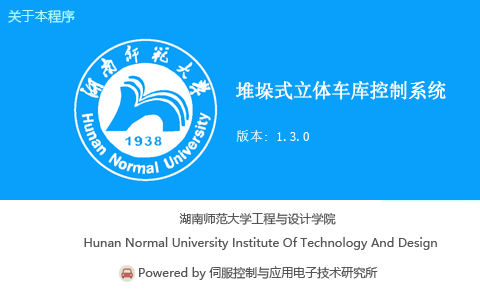
<style>
.page{position:relative;width:480px;height:300px;background:#09a0fb}
.page>*{position:absolute;margin:0}
.t1{font:13.3px "MicrosoftYaHei";color:#b6ffff}
.t2{font:18.7px "SimSun";color:#ffffff;font-weight:bold}
.t3{font:13.3px "SimSun";color:#ffffff}
.t4{font:12px "MicrosoftYaHei";color:#555555}
</style>
<div class="page">
<p class="t1" style="left:8px;top:9px;width:67px;height:15px">关于本程序</p>
<p class="t2" style="left:236px;top:81px;width:210px;height:19px">堆垛式立体车库控制系统</p>
<p class="t3" style="left:236px;top:130px;width:73px;height:12px">版本: 1.3.0</p>
<p class="t4" style="left:179px;top:212px;width:157px;height:13px">湖南师范大学工程与设计学院</p>
<p class="t4" style="left:84px;top:237px;width:353px;height:13px">Hunan Normal University Institute Of Technology And Design</p>
<p class="t4" style="left:139px;top:266px;width:239px;height:14px">Powered by 伺服控制与应用电子技术研究所</p>
</div>
